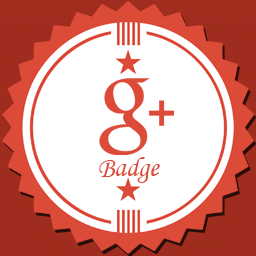
<style>
.page{position:relative;width:256px;height:256px;background:#ffffff}
.page>*{position:absolute;margin:0}
.t1{font:27.6px "MonotypeCorsiva";color:#dc4a38}
</style>
<div class="page">
<p class="t1" style="left:99px;top:157px;width:61px;height:26px">Badge</p>
</div>
